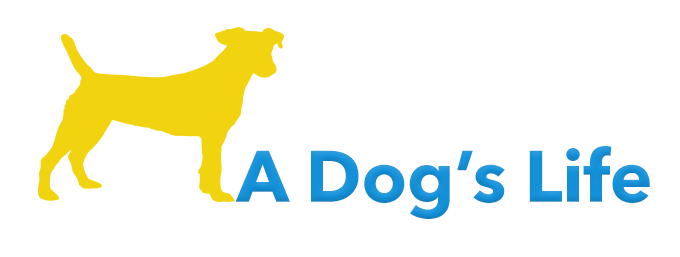
<style>
.page{position:relative;width:680px;height:257px;background:#ffffff}
.page>*{position:absolute;margin:0}
.t1{font:72px "AvenirNext-Bold";color:#1491d9}
</style>
<div class="page">
<p class="t1" style="left:235px;top:146px;width:415px;height:73px">A Dog’s Life</p>
</div>
